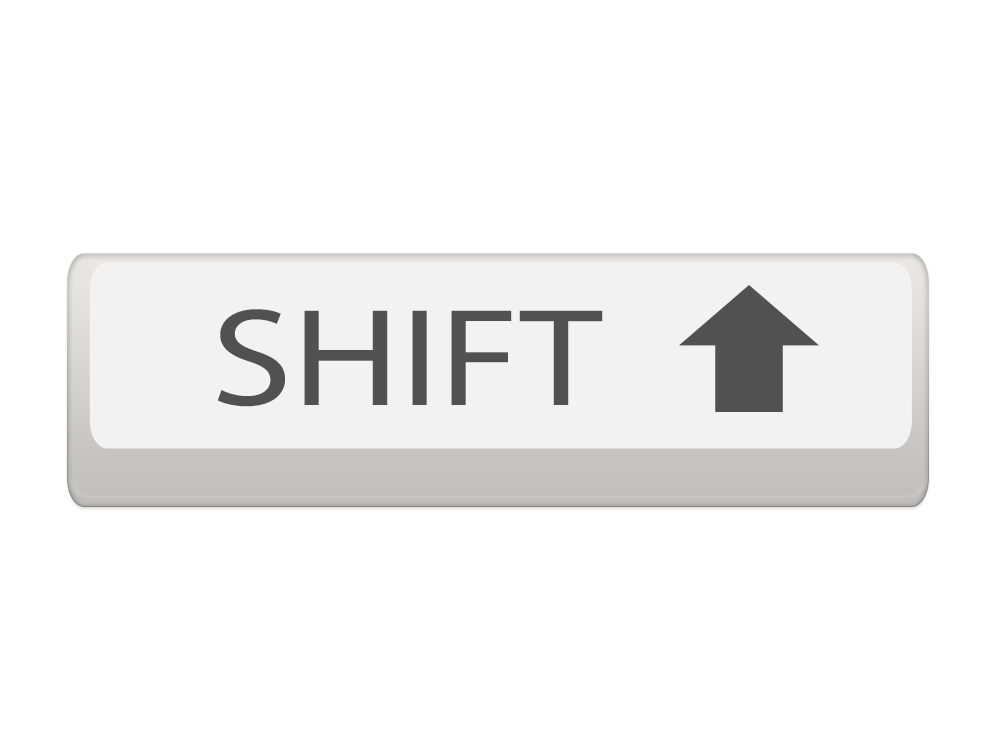
<style>
.page{position:relative;width:995px;height:732px;background:#ffffff}
.page>*{position:absolute;margin:0}
.t1{font:140px "MyriadPro-Regular";color:#515151;scale:1.18 1}
</style>
<div class="page">
<p class="t1" style="left:217px;top:309px;width:386px;height:98px">SHIFT</p>
</div>
